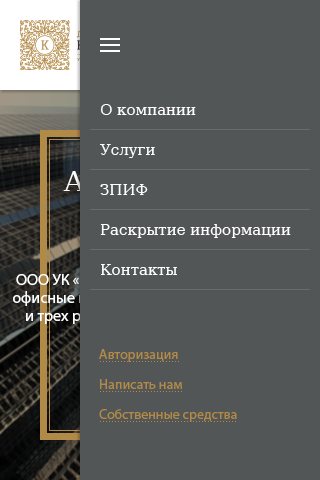
<style>
.page{position:relative;width:320px;height:480px;background:#535656}
.page>*{position:absolute;margin:0}
.t1{font:15px/40px "DejaVuSerif";color:#ffffff}
.t2{font:14px/30px "MyriadPro-Regular";color:#b28a48}
.t3{font:10px/30px "ArialMT";color:#b28a48}
</style>
<div class="page">
<p class="t1" style="left:100px;top:104px;width:191px;height:171px">О компании<br>Услуги<br>ЗПИФ<br>Раскрытие информации<br>Контакты</p>
<p class="t2" style="left:99px;top:349px;width:138px;height:73px">Авторизация<br>Написать нам<br>Собственные средства</p>
<p class="t3" style="left:100px;top:361px;width:136px;height:61px">...........................<br>............................<br>..............................................</p>
</div>
